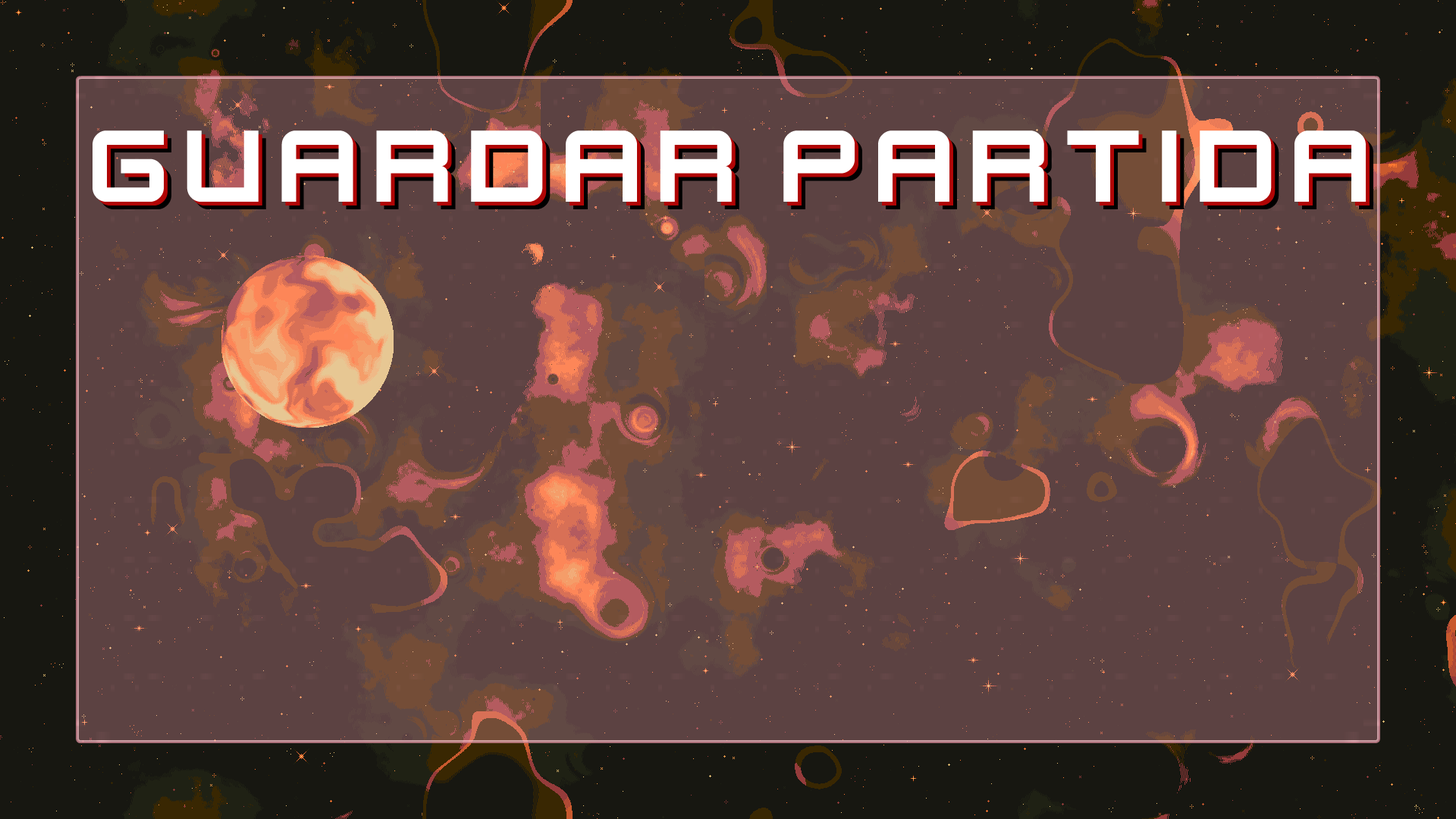
<style>
.page{position:relative;width:1456px;height:819px;background:#5c4242}
.page>*{position:absolute;margin:0}
.t1{font:113.7px "KenVector-Future";color:#ffffff}
</style>
<div class="page">
<p class="t1" style="left:93px;top:130px;width:1273px;height:72px">guardar partida</p>
<p class="t1" style="left:96px;top:134px;width:1274px;height:72px">guardar partida</p>
</div>
